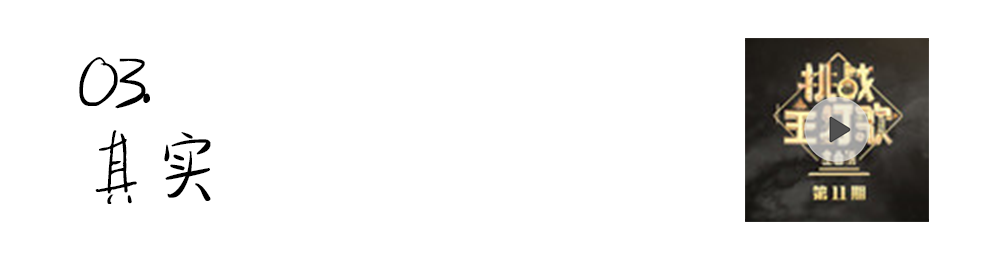
<style>
.page{position:relative;width:1000px;height:261px;background:#ffffff}
.page>*{position:absolute;margin:0}
.t1{font:77px/36px "SentyTEA-Platinum";letter-spacing:-0.1em;color:#000000}
.t2{font:77px/84px "SentyTEA-Platinum";letter-spacing:-0.1em;color:#000000}
</style>
<div class="page">
<p class="t1" style="left:79px;top:57px;width:132px;height:147px">03.<br><span class="t2">其实</span></p>
</div>
